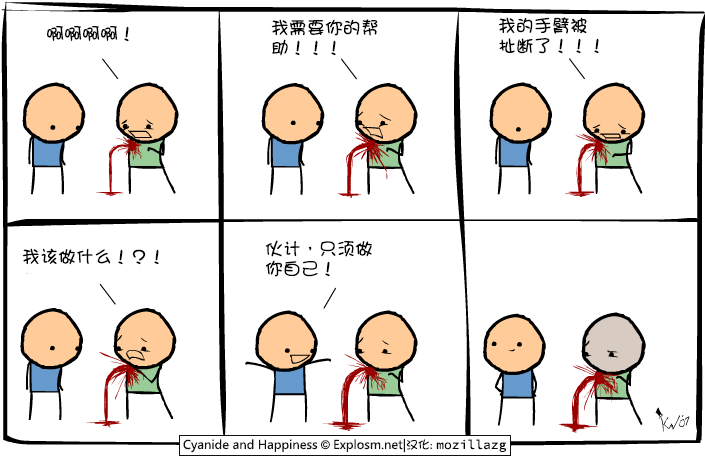
<style>
.page{position:relative;width:705px;height:456px;background:#ffffff}
.page>*{position:absolute;margin:0}
.t1{font:18px/20px "DFGirl";color:#000000}
.t2{font:18px "DFGirl";color:#000000}
</style>
<div class="page">
<p class="t1" style="left:498px;top:17px;width:101px;height:37px">我的手臂被<br>扯断了！！！</p>
<p class="t2" style="left:47px;top:26px;width:82px;height:16px">啊啊啊啊！</p>
<p class="t1" style="left:271px;top:19px;width:107px;height:37px">我需要你的帮<br>助！！！</p>
<p class="t1" style="left:265px;top:240px;width:107px;height:37px">伙计，只须做<br>你自己！</p>
<p class="t2" style="left:22px;top:248px;width:137px;height:17px">我该做什么！？！</p>
</div>
